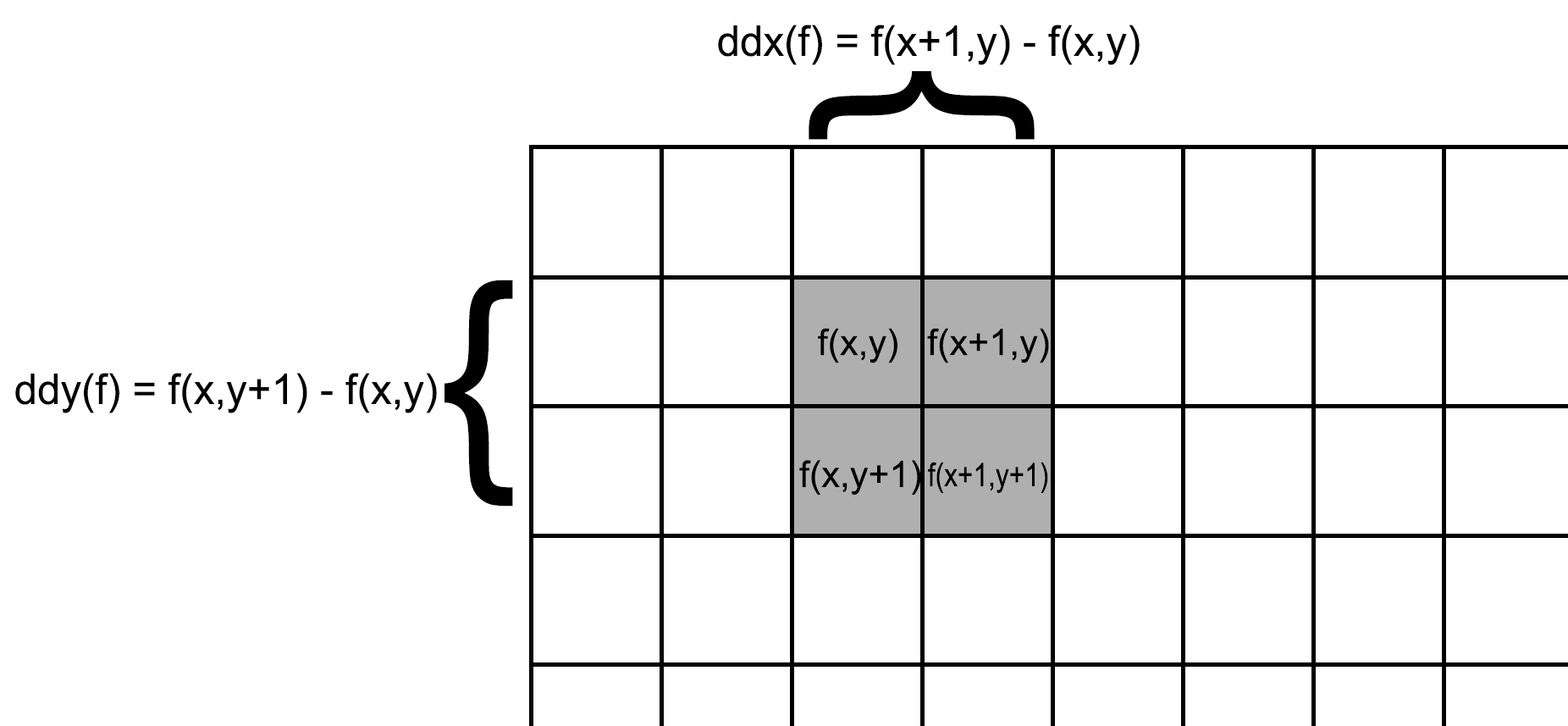
<style>
.page{position:relative;width:1568px;height:726px;background:#ffffff}
.page>*{position:absolute;margin:0}
.t1{font:42.2px "ArialMT";color:#000000}
.t2{font:240.3px "ArialMT";color:#000000}
.t3{font:36.5px "ArialMT";color:#000000}
.t4{font:32.4px "ArialMT";color:#000000;scale:0.83 1}
</style>
<div class="page">
<p class="t1" style="left:718px;top:25px;width:422px;height:40px">ddx(f) = f(x+1,y) - f(x,y)</p>
<p class="t2" style="left:809px;top:71px;width:226px;height:69px;rotate:90deg">{</p>
<p class="t2" style="left:444px;top:279px;width:69px;height:227px">{</p>
<p class="t3" style="left:818px;top:328px;width:79px;height:35px">f(x,y)</p>
<p class="t3" style="left:927px;top:328px;width:122px;height:35px">f(x+1,y)</p>
<p class="t1" style="left:15px;top:373px;width:422px;height:40px">ddy(f) = f(x,y+1) - f(x,y)</p>
<p class="t3" style="left:799px;top:460px;width:122px;height:34px">f(x,y+1)</p>
<p class="t4" style="left:928px;top:461px;width:120px;height:32px">f(x+1,y+1)</p>
</div>
